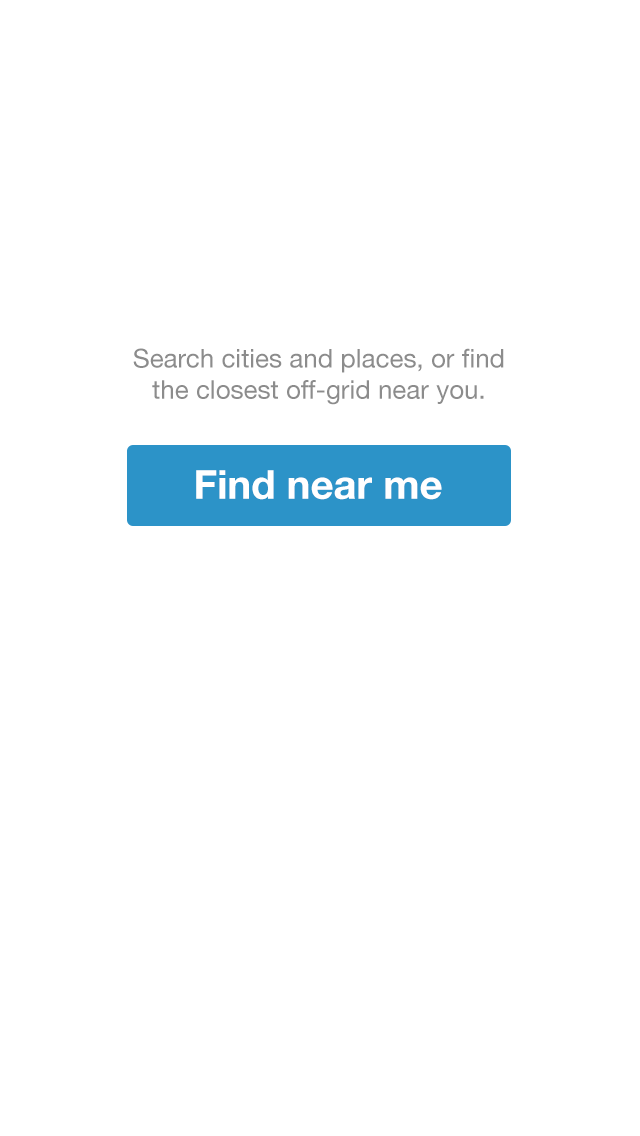
<style>
.page{position:relative;width:640px;height:1136px;background:#ffffff}
.page>*{position:absolute;margin:0}
.t1{font:26px "HelveticaNeue";color:#8c8c8c}
.t2{font:40px "HelveticaNeue-Bold";color:#ffffff}
</style>
<div class="page">
<p class="t1" style="left:133px;top:348px;width:371px;height:57px;text-align:center">Search cities and places, or find the closest off-grid near you.</p>
<p class="t2" style="left:196px;top:470px;width:246px;height:30px">Find near me</p>
</div>
